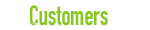
<style>
.page{position:relative;width:150px;height:30px;background:#ffffff}
.page>*{position:absolute;margin:0}
.t1{font:27.5px "DINCondensed-Bold";color:#86c821;scale:0.87 1}
</style>
<div class="page">
<p class="t1" style="left:30px;top:5px;width:78px;height:21px">Customers</p>
</div>
